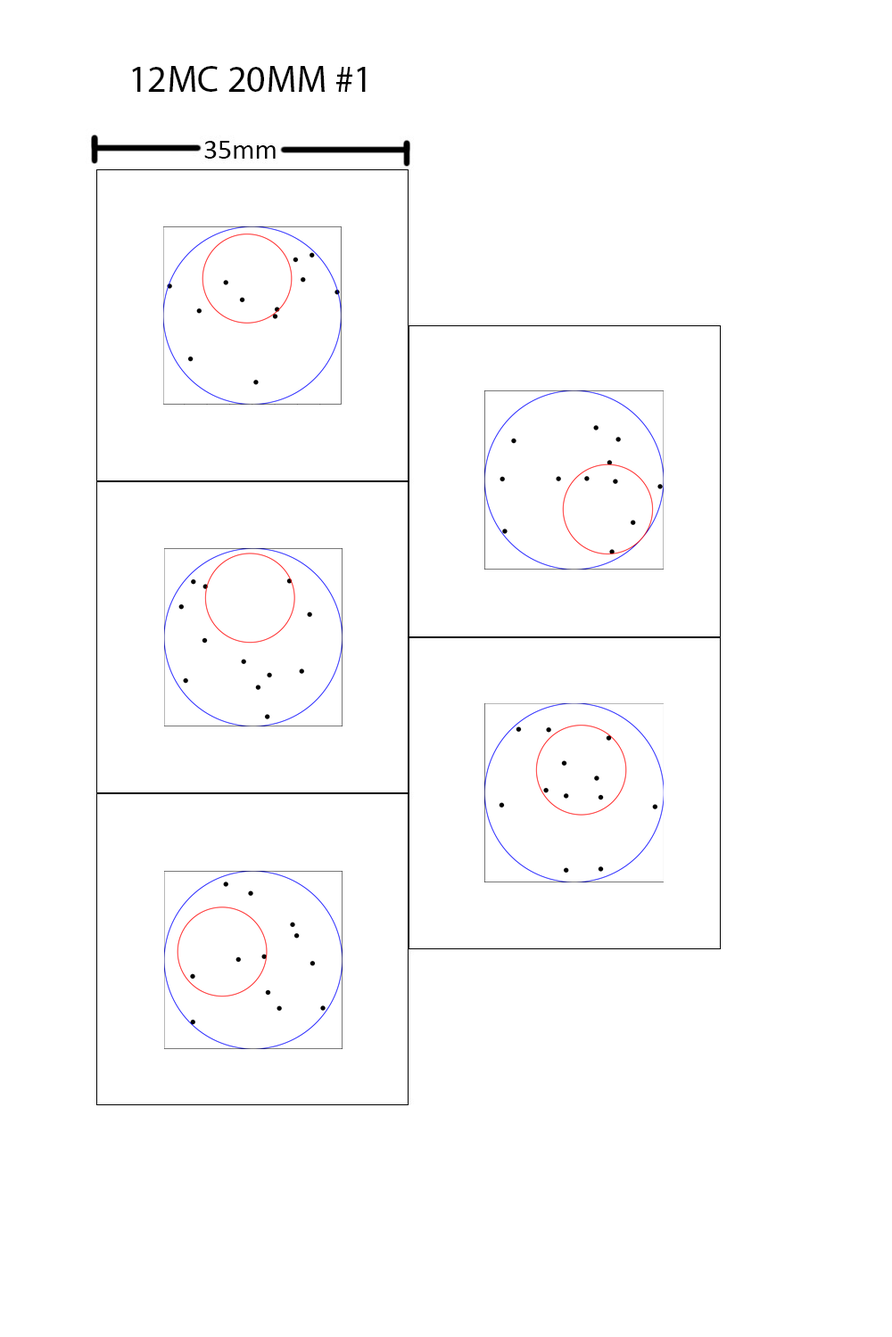
<style>
.page{position:relative;width:892px;height:1337px;background:#ffffff}
.page>*{position:absolute;margin:0}
.t1{font:37.7px "MyriadPro-Regular";color:#000000}
</style>
<div class="page">
<p class="t1" style="left:132px;top:66px;width:234px;height:26px">12MC 20MM #1</p>
</div>
